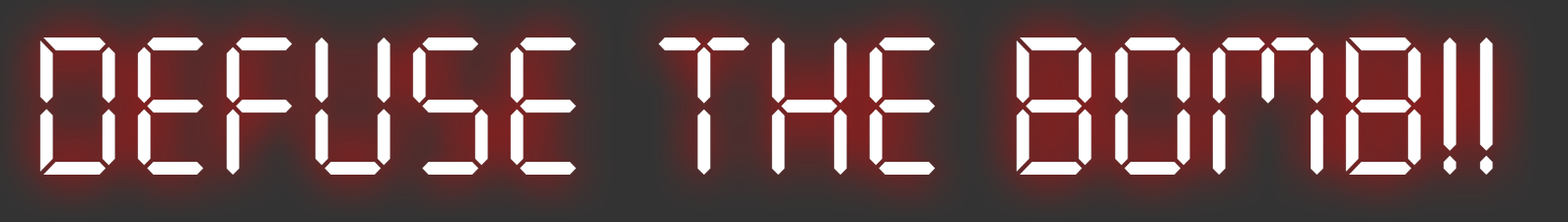
<style>
.page{position:relative;width:1568px;height:222px}
.page>*{position:absolute;margin:0}
.t1{font:194.9px "SevenSegmentRegular";color:#ffffff}
</style>
<div class="page">
<p class="t1" style="left:39px;top:37px;width:1454px;height:138px">Defuse the bomb!!</p>
</div>
